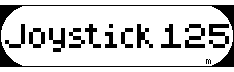
<style>
.page{position:relative;width:234px;height:72px;background:#ffffff}
.page>*{position:absolute;margin:0}
.t1{font:32px "ZX 6x8";color:#000000}
</style>
<div class="page">
<p class="t1" style="left:5px;top:24px;width:224px;height:28px">Joystick125</p>
</div>
